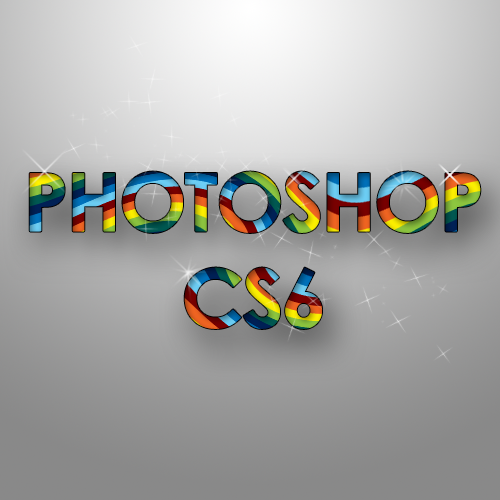
<style>
.page{position:relative;width:500px;height:500px}
.page>*{position:absolute;margin:0}
.t1{font:80px "CenturyGothic-Bold";letter-spacing:-0.05em;font-weight:bold}
</style>
<div class="page">
<p class="t1" style="left:29px;top:171px;width:452px;height:158px;text-align:center">PHOTOSHOP<br>CS6</p>
</div>
